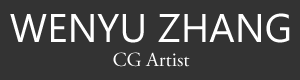
<style>
.page{position:relative;width:300px;height:80px;background:#333333}
.page>*{position:absolute;margin:0}
.t1{font:40px/34px "SegoeUI";color:#ffffff}
.t2{font:20px/24px "AGaramondPro-Regular";color:#ffffff}
</style>
<div class="page">
<p class="t1" style="left:10px;top:13px;width:280px;height:54px;text-align:center">WENYU ZHANG<br><span class="t2">CG Artist</span></p>
</div>
